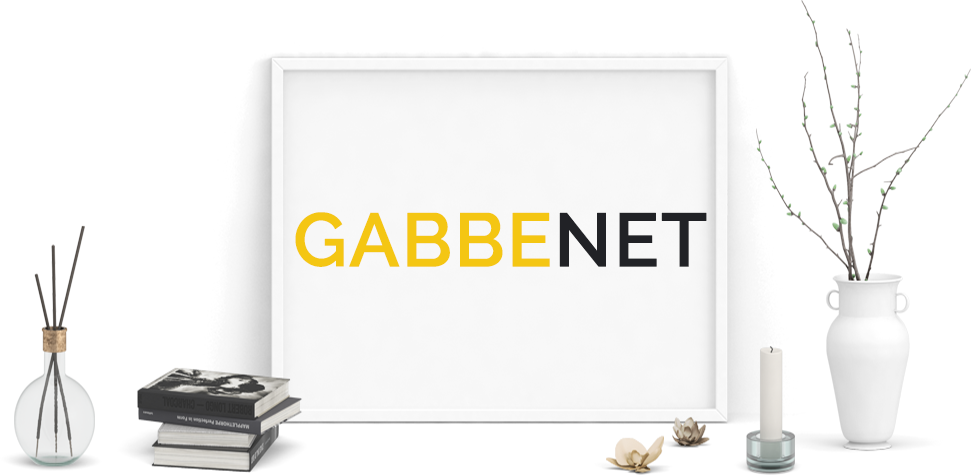
<style>
.page{position:relative;width:971px;height:475px;background:#ffffff}
.page>*{position:absolute;margin:0}
.t1{font:75px "Raleway-SemiBold";color:#f4c613;font-weight:bold}
.t2{font:75px "Raleway-SemiBold";color:#212226;font-weight:bold}
</style>
<div class="page">
<p class="t1" style="left:295px;top:212px;width:412px;height:55px">GABBE<span class="t2">NET</span></p>
</div>
